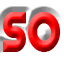
<style>
.page{position:relative;width:64px;height:64px;background:#ffffff}
.page>*{position:absolute;margin:0}
.t1{font:58.3px "LeanForeword";scale:0.8 1}
</style>
<div class="page">
<p class="t1" style="left:3px;top:12px;width:58px;height:40px">SO</p>
</div>
